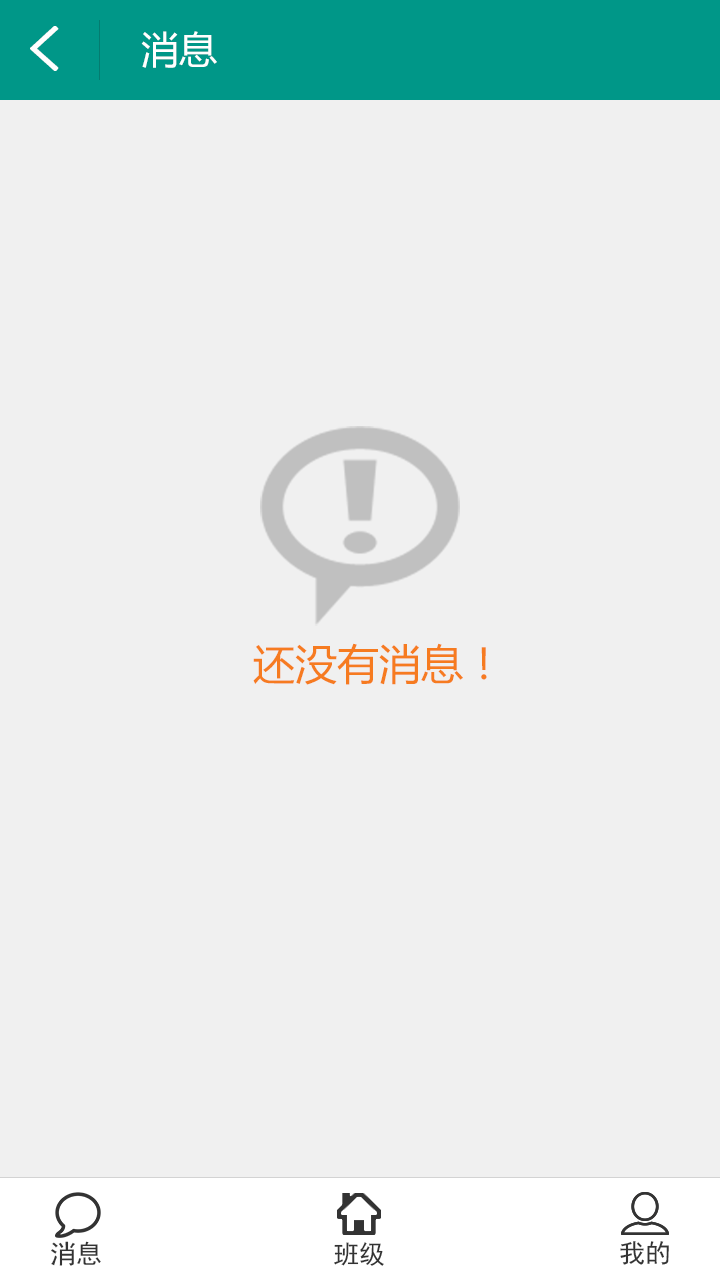
<style>
.page{position:relative;width:720px;height:1280px;background:#f0f0f0}
.page>*{position:absolute;margin:0}
.t1{font:62px "SimHei";color:#ffffff;font-weight:bold}
.t2{font:38px "MicrosoftYaHei";color:#ffffff}
.t3{font:42px "MicrosoftYaHei";color:#f67b20}
.t4{font:26px "SimHei";color:#333333}
</style>
<div class="page">
<p class="t1" style="left:30px;top:26px;width:29px;height:45px">&lt;</p>
<p class="t2" style="left:141px;top:31px;width:76px;height:37px">消息</p>
<p class="t3" style="left:253px;top:643px;width:234px;height:42px">还没有消息！</p>
<p class="t4" style="left:51px;top:1241px;width:50px;height:25px">消息</p>
<p class="t4" style="left:620px;top:1241px;width:49px;height:24px">我的</p>
<p class="t4" style="left:334px;top:1242px;width:50px;height:24px">班级</p>
</div>
